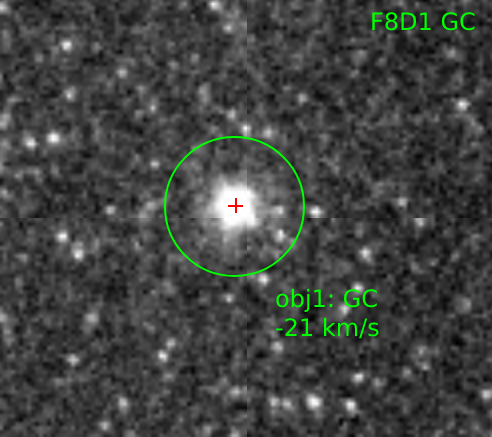
<style>
.page{position:relative;width:492px;height:437px}
.page>*{position:absolute;margin:0}
.t1{font:24px "DejaVuSans";color:#00ff00}
</style>
<div class="page">
<p class="t1" style="left:372px;top:12px;width:103px;height:19px">F8D1 GC</p>
<p class="t1" style="left:276px;top:288px;width:103px;height:51px">obj1: GC<br>-21 km/s</p>
</div>
